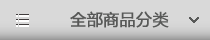
<style>
.page{position:relative;width:210px;height:40px;background:#d9d9d9}
.page>*{position:absolute;margin:0}
.t1{font:16px "MicrosoftYaHei";color:#585958;font-weight:bold}
</style>
<div class="page">
<p class="t1" style="left:70px;top:11px;width:99px;height:17px">全部商品分类</p>
</div>
